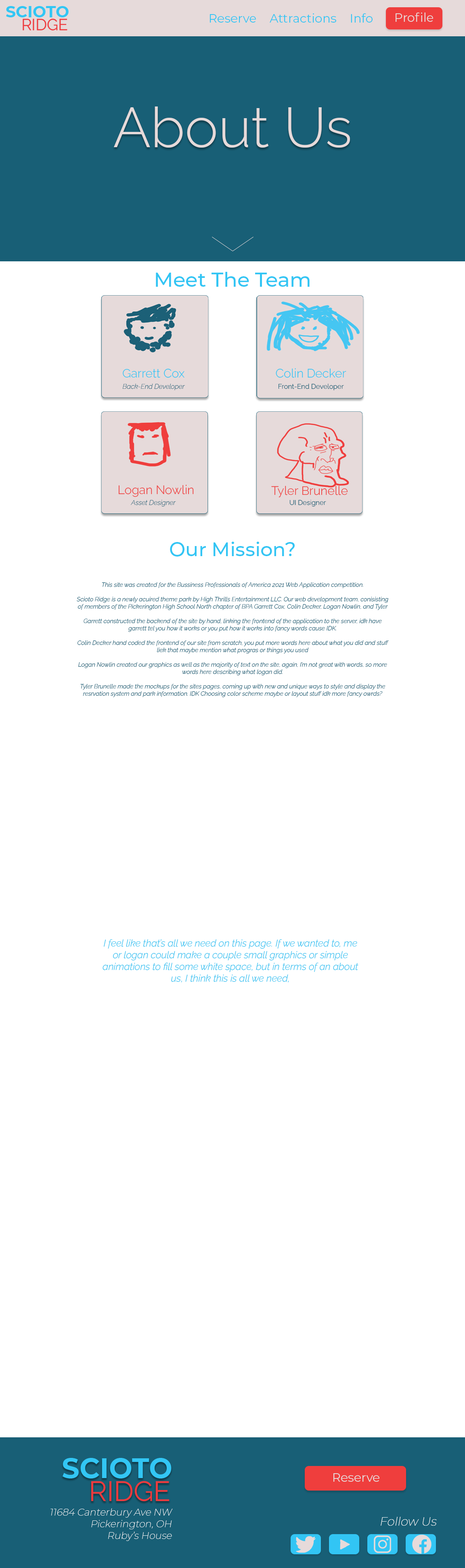
<style>
.page{position:relative;width:465px;height:1568px;background:#ffffff}
.page>*{position:absolute;margin:0}
.t1{font:12.1px "Montserrat-Regular";color:#32c5f4}
.t2{font:12.1px "Montserrat-Regular";color:#e6dada}
.t3{font:56.1px "RalewayRoman-Light";color:#e6dada;font-style:italic}
.t4{font:20.2px "Montserrat-Medium";color:#32c5f4}
.t5{font:12.1px "RalewayRoman-Light";color:#32c5f4;font-style:italic}
.t6{font:6.9px "RalewayItalic-ExtraLightItalic";color:#1c6077;font-style:italic}
.t7{font:6.9px "RalewayRoman-Light";color:#1c6077;font-style:italic}
.t8{font:12.1px "RalewayRoman-Light";color:#ef3e3d;font-style:italic}
.t9{font:19.4px "Montserrat-Medium";color:#32c5f4}
.t10{font:6px "RalewayItalic-LightItalic";color:#1c6077;font-style:italic}
.t11{font:9.7px "RalewayItalic-LightItalic";color:#45c6f2;font-style:italic}
.t12{font:9.7px "Montserrat-ExtraLight";color:#ffffff;font-style:italic}
.t13{font:12.1px "Montserrat-ExtraLight";color:#ffffff;font-style:italic}
</style>
<div class="page">
<p class="t1" style="left:210px;top:14px;width:46px;height:9px">Reserve</p>
<p class="t1" style="left:269px;top:13px;width:67px;height:10px">Attractions</p>
<p class="t1" style="left:350px;top:13px;width:22px;height:10px">Info</p>
<p class="t2" style="left:395px;top:13px;width:38px;height:9px">Profile</p>
<p class="t3" style="left:114px;top:106px;width:236px;height:42px">About Us</p>
<p class="t4" style="left:156px;top:272px;width:153px;height:15px">Meet The Team</p>
<p class="t5" style="left:123px;top:369px;width:61px;height:9px">Garrett Cox</p>
<p class="t5" style="left:275px;top:368px;width:71px;height:10px">Colin Decker</p>
<p class="t6" style="left:123px;top:384px;width:62px;height:6px">Back-End Developer</p>
<p class="t7" style="left:278px;top:384px;width:66px;height:6px">Front-End Developer</p>
<p class="t8" style="left:119px;top:485px;width:75px;height:12px">Logan Nowlin</p>
<p class="t8" style="left:271px;top:486px;width:77px;height:11px">Tyler Brunelle</p>
<p class="t6" style="left:131px;top:500px;width:45px;height:7px">Asset Designer</p>
<p class="t7" style="left:290px;top:500px;width:36px;height:7px">UI Designer</p>
<p class="t9" style="left:170px;top:542px;width:124px;height:15px">Our Mission?</p>
<p class="t10" style="left:77px;top:582px;width:311px;height:115px;text-align:center">This site was created for the Bussiness Professionals of America 2021 Web Application competition. <br><br>Scioto Ridge is a newly acuired theme park by High Thrills Entertainment LLC. Our web development team, conisisting of members of the Pickerington High School North chapter of BPA Garrett Cox, Colin Decker, Logan Nowlin, and Tyler <br><br>Garrett constructed the backend of the site by hand, linking the frontend of the application to the server, idk have garrett tel you how it works or you put how it works into fancy words cause IDK.<br><br>Colin Decker hand coded the frontend of our site from scratch, you put more words here about what you did and stuff liek that maybe mention what progras or things you used<br><br>Logan Nowlin created our graphics as well as the majority of text on the site, again, I’m not great with words, so more words here describing what logan did.<br><br>Tyler Brunelle made the mockups for the sites pages, coming up with new and unique ways to style and display the resrvation system and park information. IDK Choosing color scheme maybe or layout stuff idk more fancy owrds?</p>
<p class="t11" style="left:102px;top:939px;width:256px;height:43px;text-align:center">I feel like that’s all we need on this page. If we wanted to, me or logan could make a couple small graphics or simple animations to fill some white space, but in terms of an about us, I think this is all we need,</p>
<p class="t2" style="left:333px;top:1473px;width:46px;height:9px">Reserve</p>
<p class="t12" style="left:50px;top:1508px;width:123px;height:33px;text-align:right">11684 Canterbury Ave NW<br>Pickerington, OH<br>Ruby’s House</p>
<p class="t13" style="left:380px;top:1517px;width:56px;height:9px">Follow Us</p>
</div>
